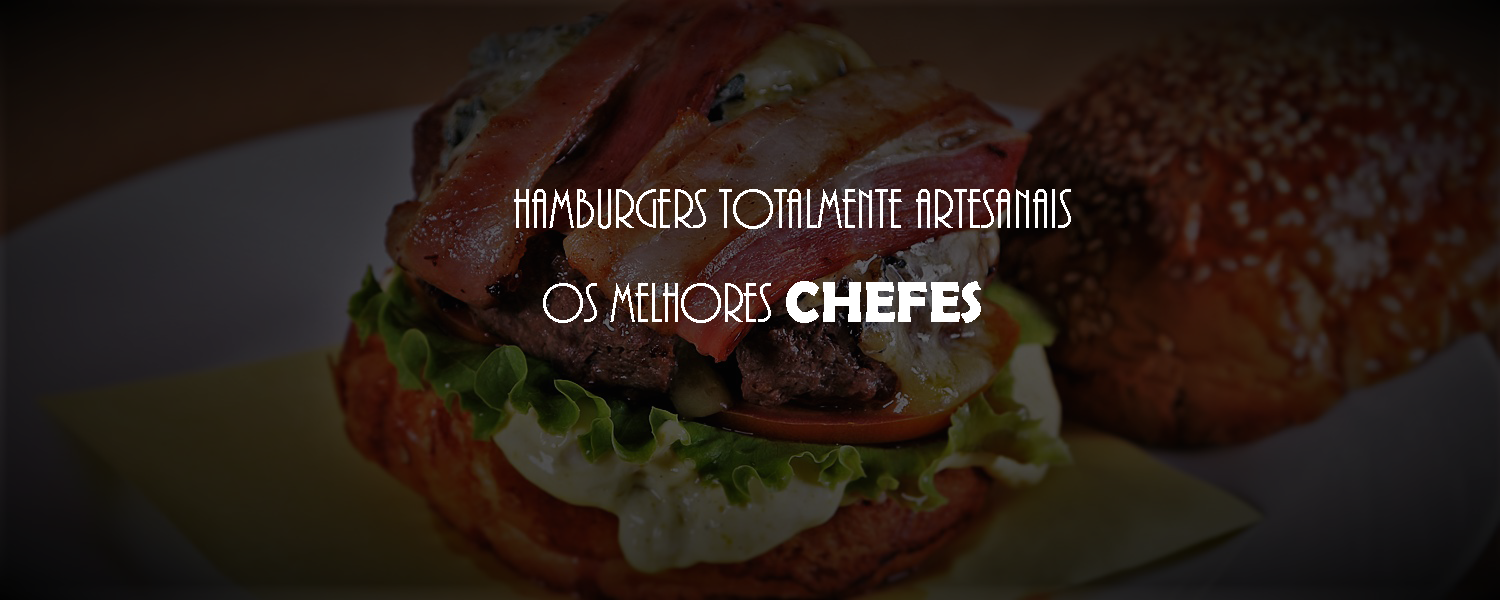
<style>
.page{position:relative;width:1500px;height:600px}
.page>*{position:absolute;margin:0}
.t1{font:57.6px "ARBONNIE";color:#ffffff}
.t2{font:57.6px "BerlinSansFBDemi-Bold";color:#ffffff}
</style>
<div class="page">
<p class="t1" style="left:514px;top:189px;width:557px;height:40px">Hamburgers totalmente artesanais</p>
<p class="t1" style="left:543px;top:281px;width:438px;height:42px">Os melhores <span class="t2">CHEFES</span></p>
</div>
